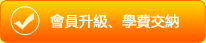
<style>
.page{position:relative;width:206px;height:43px}
.page>*{position:absolute;margin:0}
.t1{font:14px "MicrosoftYaHei";color:#ffffff;font-weight:bold}
</style>
<div class="page">
<p class="t1" style="left:50px;top:14px;width:129px;height:15px">會員升級、學費交納</p>
</div>
